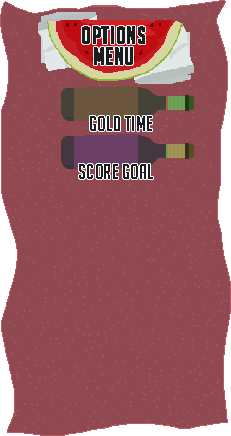
<style>
.page{position:relative;width:231px;height:436px;background:#904951}
.page>*{position:absolute;margin:0}
.t1{font:22.9px/20.8px "BigNoodleTitling";letter-spacing:0.025em;color:#1a1d1f;font-weight:bold}
.t2{font:20.8px "BigNoodleTitling";letter-spacing:0.025em;color:#1a1d1f}
</style>
<div class="page">
<p class="t1" style="left:82px;top:26px;width:63px;height:39px;text-align:center">Options<br>Menu</p>
<p class="t2" style="left:90px;top:116px;width:62px;height:15px">Gold Time</p>
<p class="t2" style="left:79px;top:164px;width:74px;height:15px">Score Goal</p>
</div>
